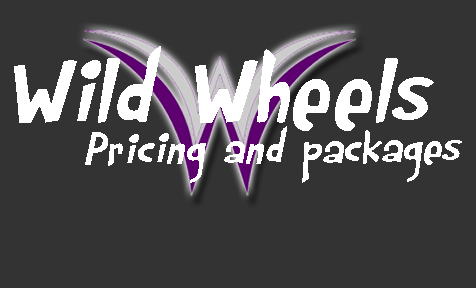
<style>
.page{position:relative;width:476px;height:288px;background:#333333}
.page>*{position:absolute;margin:0}
.t1{font:100px "Rumpelstiltskin";color:#ffffff;font-style:italic}
.t2{font:48px "Rumpelstiltskin";color:#ffffff;font-style:italic}
</style>
<div class="page">
<p class="t1" style="left:14px;top:46px;width:420px;height:85px">Wild Wheels</p>
<p class="t2" style="left:85px;top:126px;width:377px;height:57px">Pricing and packages</p>
</div>
